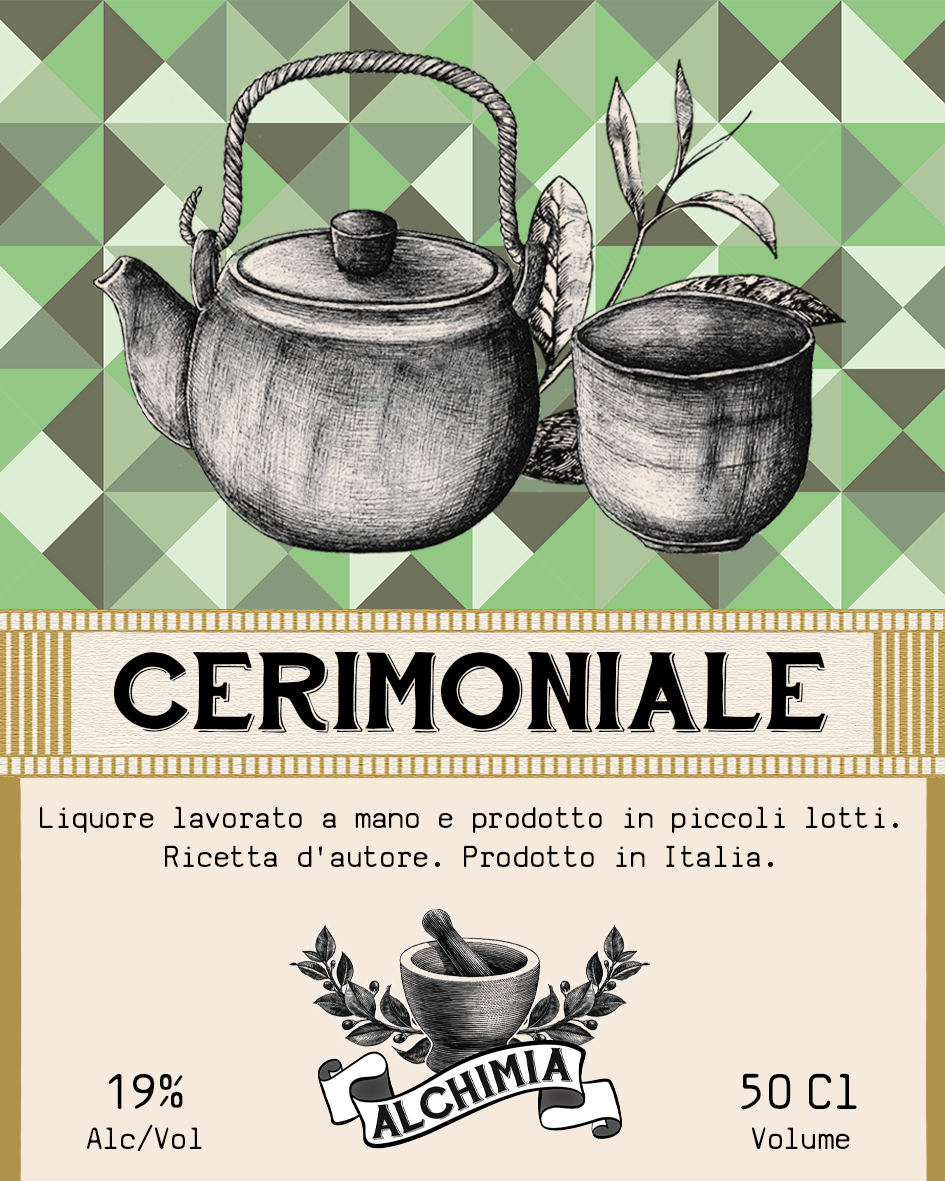
<style>
.page{position:relative;width:945px;height:1181px;background:#f6eade}
.page>*{position:absolute;margin:0}
.t1{font:110.4px "HandShopTypographyC30_demo";color:#000000}
.t2{font:32.9px "SVBasicManual";color:#000000}
.t3{font:33.3px "SVBasicManual";color:#000000}
.t4{font:54.2px "SVBasicManual";color:#000000}
</style>
<div class="page">
<p class="t1" style="left:113px;top:651px;width:715px;height:82px">CERIMONIALE</p>
<p class="t2" style="left:40px;top:806px;width:858px;height:61px;text-align:center">Liquore lavorato a mano e prodotto in piccoli lotti. <br>Ricetta d'autore. Prodotto in Italia.</p>
<p class="t3" style="left:87px;top:1073px;width:115px;height:79px;text-align:center"><span class="t4">19% <br></span>Alc/Vol</p>
<p class="t3" style="left:741px;top:1073px;width:116px;height:76px;text-align:center"><span class="t4">50 Cl<br></span>Volume</p>
</div>
